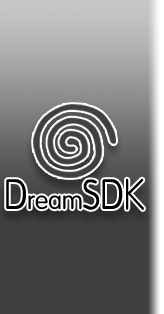
<style>
.page{position:relative;width:164px;height:314px;background:#404040}
.page>*{position:absolute;margin:0}
.t1{font:31.1px "Dreamcast";letter-spacing:-0.01em;color:#000000}
</style>
<div class="page">
<p class="t1" style="left:6px;top:178px;width:138px;height:32px">DreamSDK</p>
</div>
